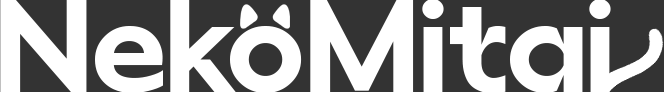
<style>
.page{position:relative;width:664px;height:92px;background:#ffffff}
.page>*{position:absolute;margin:0}
.t1{font:133.6px "Reaktif-Bold";color:#ffffff}
</style>
<div class="page">
<p class="t1" style="left:0px;top:0px;width:611px;height:93px">NekoMitai</p>
</div>
